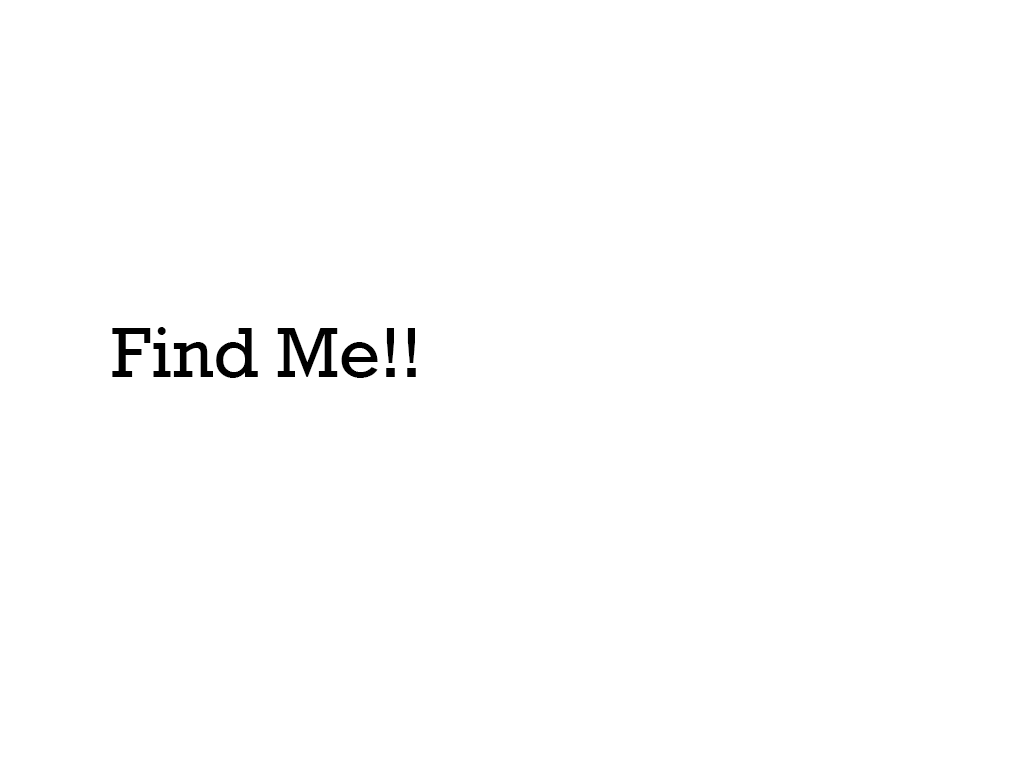
<style>
.page{position:relative;width:1024px;height:768px;background:#ffffff}
.page>*{position:absolute;margin:0}
.t1{font:72px "Rockwell";color:#000000}
.t2{font:72px "MyriadPro-Regular";color:#000000}
</style>
<div class="page">
<p class="t1" style="left:112px;top:327px;width:304px;height:51px"><span class="t2"><br></span><br>Find Me!!</p>
</div>
